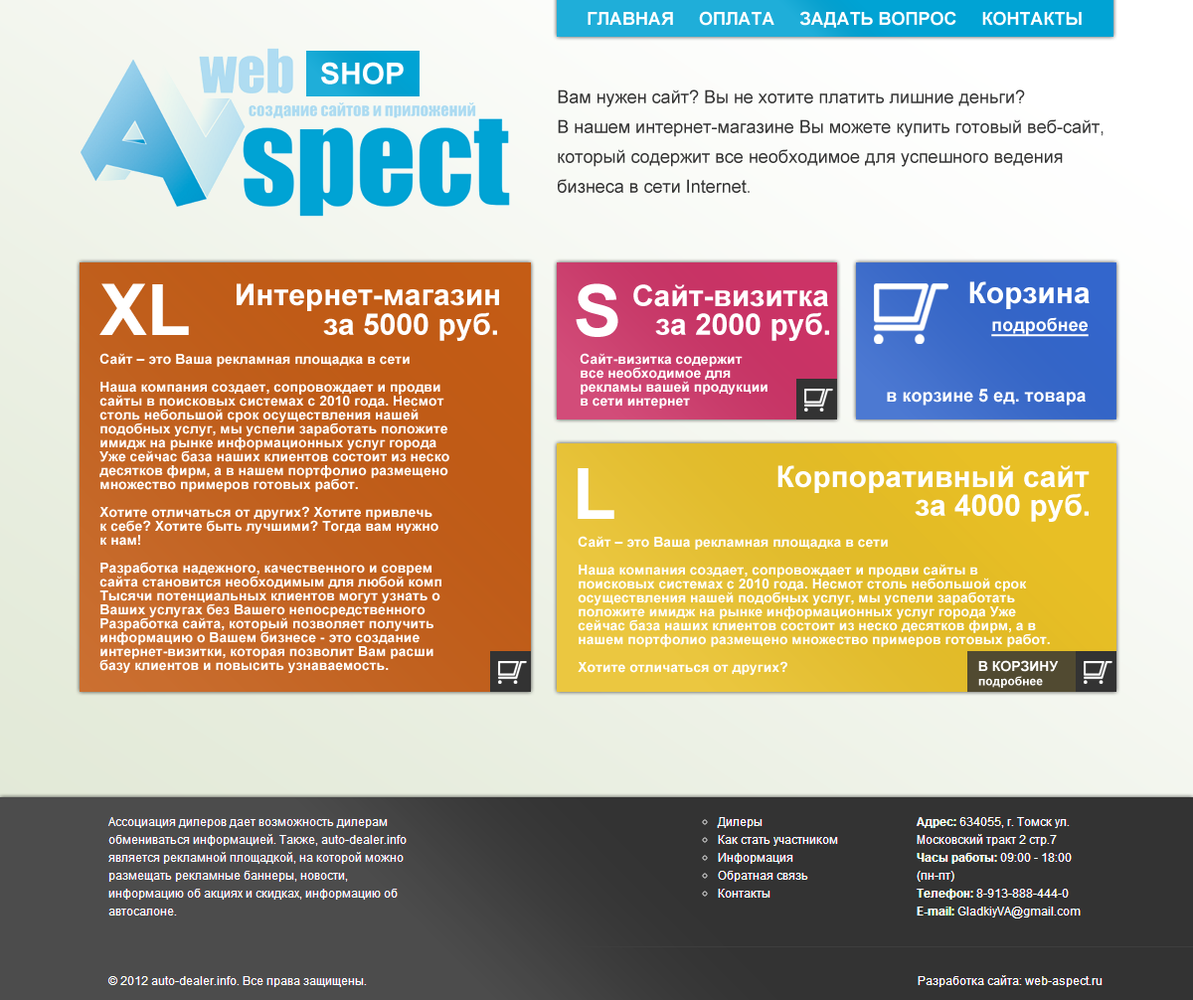
<style>
.page{position:relative;width:1193px;height:1000px}
.page>*{position:absolute;margin:0}
.t1{font:17.9px "Arial-BoldMT";color:#ffffff}
.t2{font:29.8px "Arial-BoldMT";color:#ffffff}
.t3{font:17.9px/29.8px "ArialMT";color:#333333}
.t4{font:71.6px "Arial-BoldMT";color:#ffffff}
.t5{font:17.9px "Arial-BoldMT";color:#ffffff;text-decoration:underline}
.t6{font:13.9px/13.9px "Arial-BoldMT";color:#ffffff}
.t7{font:13.9px "Arial-BoldMT";color:#ffffff}
.t8{font:11.9px "Arial-BoldMT";color:#ffffff}
</style>
<div class="page">
<p class="t1" style="left:587px;top:11px;width:494px;height:17px">ГЛАВНАЯ     ОПЛАТА     ЗАДАТЬ ВОПРОС     КОНТАКТЫ</p>
<p class="t2" style="left:321px;top:62px;width:83px;height:22px">SHOP</p>
<p class="t3" style="left:558px;top:89px;width:545px;height:104px">Вам нужен сайт? Вы не хотите платить лишние деньги?<br>В нашем интернет-магазине Вы можете купить готовый веб-сайт,<br>который содержит все необходимое для успешного ведения <br>бизнеса в сети Internet.</p>
<p class="t2" style="left:969px;top:281px;width:120px;height:28px">Корзина</p>
<p class="t4" style="left:99px;top:283px;width:90px;height:52px">XL</p>
<p class="t2" style="left:237px;top:283px;width:262px;height:28px">Интернет-магазин</p>
<p class="t4" style="left:575px;top:283px;width:43px;height:54px">S</p>
<p class="t2" style="left:633px;top:284px;width:195px;height:23px">Сайт-визитка</p>
<p class="t2" style="left:323px;top:312px;width:174px;height:29px">за 5000 руб.</p>
<p class="t2" style="left:655px;top:312px;width:174px;height:29px">за 2000 руб.</p>
<p class="t5" style="left:991px;top:317px;width:97px;height:20px">подробнее</p>
<p class="t6" style="left:99px;top:353px;width:350px;height:320px">Сайт – это Ваша рекламная площадка в сети<br><br>Наша компания создает, сопровождает и продви<br>сайты в поисковых системах с 2010 года. Несмот<br>столь небольшой срок осуществления нашей<br>подобных услуг, мы успели заработать положите<br>имидж на рынке информационных услуг города<br>Уже сейчас база наших клиентов состоит из неско<br>десятков фирм, а в нашем портфолио размещено <br>множество примеров готовых работ.<br><br>Хотите отличаться от других? Хотите привлечь<br>к себе? Хотите быть лучшими? Тогда вам нужно<br>к нам! <br><br>Разработка надежного, качественного и соврем<br>сайта становится необходимым для любой комп<br>Тысячи потенциальных клиентов могут узнать о<br>Ваших услугах без Вашего непосредственного<br>Разработка сайта, который позволяет получить<br>информацию о Вашем бизнесе - это создание<br>интернет-визитки, которая позволит Вам расши<br>базу клиентов и повысить узнаваемость.</p>
<p class="t6" style="left:579px;top:353px;width:188px;height:55px">Сайт-визитка содержит <br>все необходимое для <br>рекламы вашей продукции <br>в сети интернет</p>
<p class="t1" style="left:887px;top:389px;width:198px;height:16px">в корзине 5 ед. товара</p>
<p class="t4" style="left:577px;top:468px;width:37px;height:51px">L</p>
<p class="t2" style="left:777px;top:465px;width:312px;height:28px">Корпоративный сайт</p>
<p class="t2" style="left:914px;top:493px;width:174px;height:29px">за 4000 руб.</p>
<p class="t6" style="left:577px;top:536px;width:473px;height:139px">Сайт – это Ваша рекламная площадка в сети<br><br>Наша компания создает, сопровождает и продви сайты в <br>поисковых системах с 2010 года. Несмот столь небольшой срок <br>осуществления нашей подобных услуг, мы успели заработать <br>положите имидж на рынке информационных услуг города Уже <br>сейчас база наших клиентов состоит из неско десятков фирм, а в <br>нашем портфолио размещено множество примеров готовых работ.<br><br>Хотите отличаться от других?</p>
<p class="t7" style="left:978px;top:660px;width:80px;height:12px">В КОРЗИНУ</p>
<p class="t8" style="left:978px;top:676px;width:65px;height:12px">подробнее</p>
</div>
